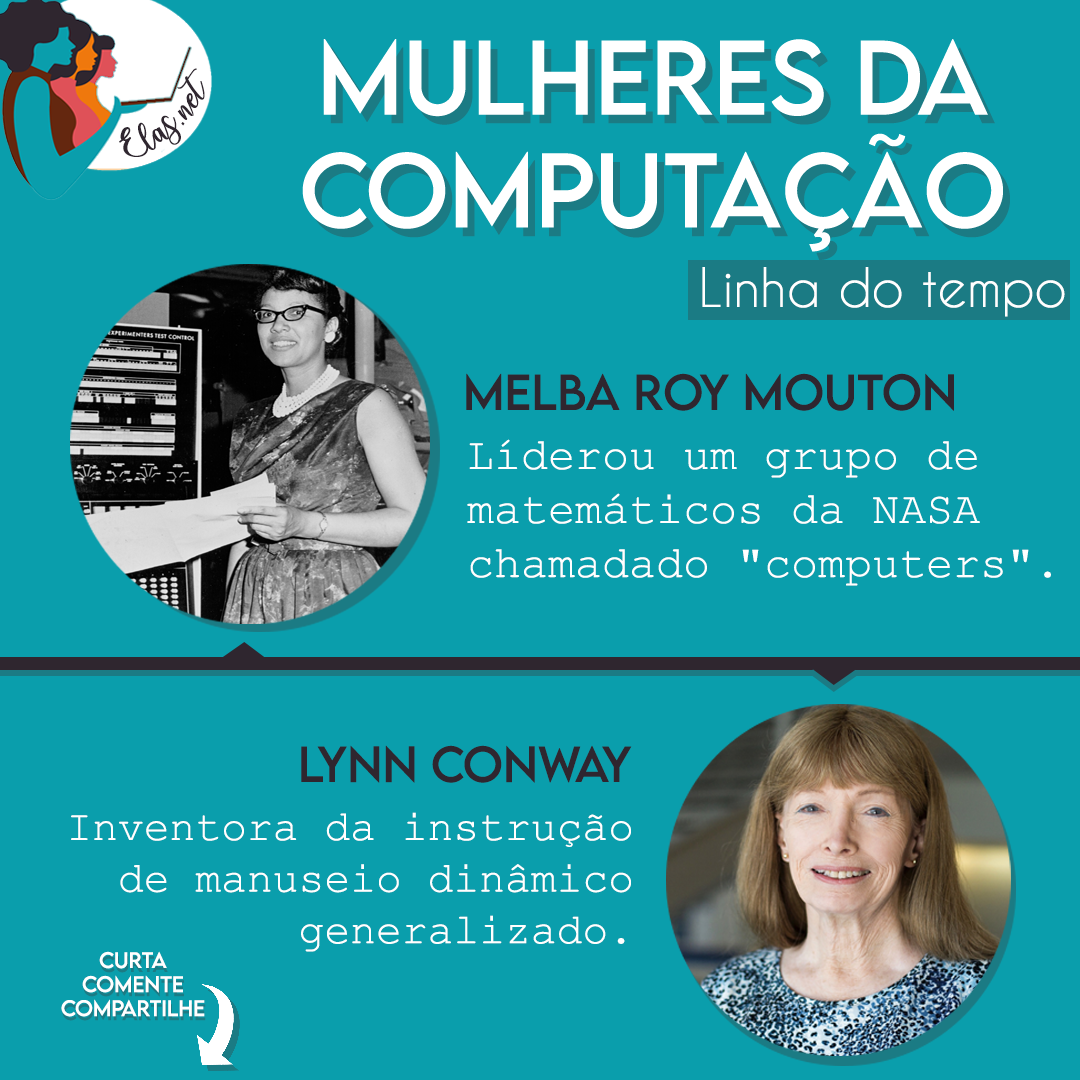
<style>
.page{position:relative;width:1080px;height:1080px;background:#0a9eac}
.page>*{position:absolute;margin:0}
.t1{font:25px "charlinda-Regular";color:#2f262f;scale:1.18 1}
.t2{font:51px "CaviarDreams";color:#ffffff}
.t3{font:45px "LEMONMILK-Regular";color:#2f262f}
.t4{font:45px "CourierNewPSMT";color:#ffffff}
.t5{font:43px "CourierNewPSMT";color:#ffffff}
.t6{font:20px "LEMONMILK-Regular";color:#ffffff}
</style>
<div class="page">
<p class="t1" style="left:119px;top:68px;width:86px;height:89px;rotate:-43deg">Elas.net</p>
<p class="t2" style="left:702px;top:267px;width:363px;height:50px">Linha do tempo</p>
<p class="t3" style="left:466px;top:373px;width:488px;height:38px">Melba Roy Mouton</p>
<p class="t4" style="left:467px;top:439px;width:584px;height:147px">Líderou um grupo de <br>matemáticos da NASA <br>chamadado "computers".</p>
<p class="t3" style="left:301px;top:745px;width:331px;height:38px">Lynn Conway</p>
<p class="t5" style="left:71px;top:812px;width:560px;height:140px;text-align:right">Inventora da instrução<br>de manuseio dinâmico<br>generalizado.</p>
<p class="t6" style="left:61px;top:951px;width:144px;height:66px;text-align:center">Curta<br>Comente<br>Compartilhe</p>
</div>
